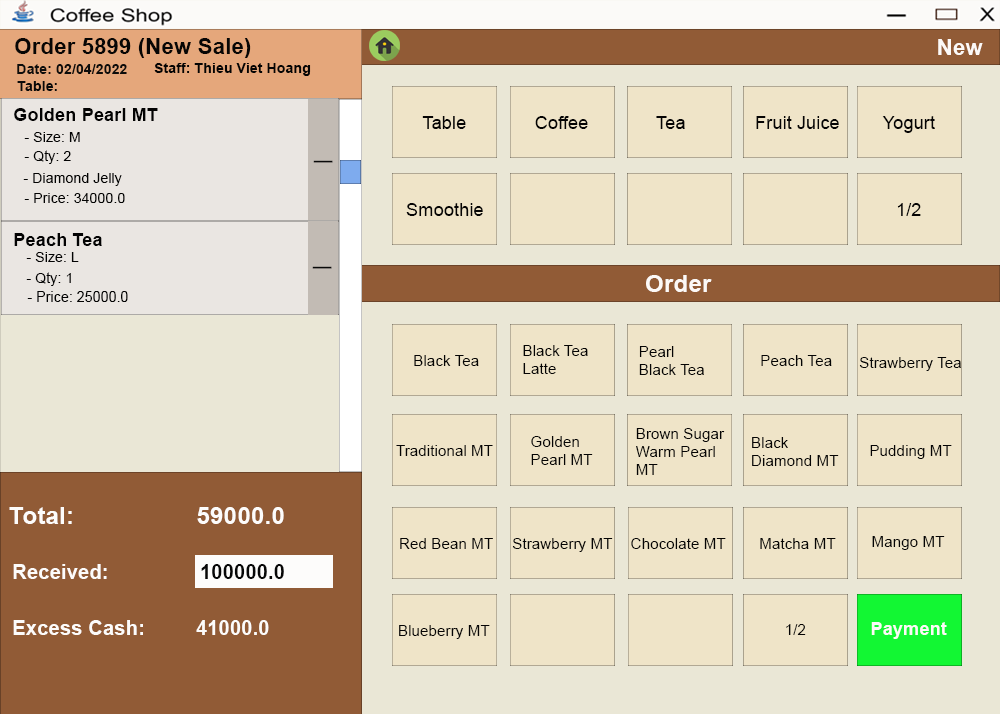
<style>
.page{position:relative;width:1000px;height:714px;background:#eae7d6}
.page>*{position:absolute;margin:0}
.t1{font:22.4px "Arial-BoldMT";color:#070605}
.t2{font:22.4px "Arial-BoldMT";color:#fcf9f7}
.t3{font:14.3px "Arial-BoldMT";color:#0c0c0b}
.t4{font:14.3px "Arial-BoldMT";color:#040404}
.t5{font:14.3px "Arial-BoldMT";color:#090909}
.t6{font:18.4px "Arial-BoldMT";color:#030303}
.t7{font:18.4px "ArialMT";color:#050404}
.t8{font:14.3px "ArialMT";color:#030303}
.t9{font:36.7px "Arial-Black";color:#090909}
.t10{font:24.5px "Arial-BoldMT";color:#fcf9f7}
.t11{font:14.7px "ArialMT";color:#030303}
.t12{font:15.3px "ArialMT";color:#050404}
.t13{font:15.3px "ArialMT";color:#040404}
.t14{font:24.5px "Arial-BoldMT";color:#fdfcfb}
.t15{font:20.4px "Arial-BoldMT";color:#fdfcfb}
.t16{font:20.4px "Arial-BoldMT";color:#070707}
.t17{font:18.4px "Arial-BoldMT";color:#fcf9f8}
</style>
<div class="page">
<p class="t1" style="left:15px;top:38px;width:236px;height:20px">Order 5899 (New Sale)</p>
<p class="t2" style="left:938px;top:39px;width:45px;height:16px">New</p>
<p class="t3" style="left:17px;top:64px;width:110px;height:10px">Date: 02/04/2022</p>
<p class="t4" style="left:154px;top:63px;width:157px;height:13px">Staff: Thieu Viet Hoang</p>
<p class="t5" style="left:17px;top:81px;width:40px;height:10px">Table:</p>
<p class="t6" style="left:14px;top:108px;width:144px;height:13px">Golden Pearl MT</p>
<p class="t7" style="left:422px;top:116px;width:44px;height:13px">Table</p>
<p class="t7" style="left:535px;top:116px;width:53px;height:13px">Coffee</p>
<p class="t7" style="left:656px;top:116px;width:29px;height:13px">Tea</p>
<p class="t7" style="left:756px;top:116px;width:83px;height:13px">Fruit Juice</p>
<p class="t7" style="left:882px;top:116px;width:53px;height:17px">Yogurt</p>
<p class="t8" style="left:24px;top:132px;width:56px;height:10px">- Size: M</p>
<p class="t8" style="left:24px;top:150px;width:47px;height:14px">- Qty: 2</p>
<p class="t9" style="left:313px;top:160px;width:20px;height:3px">_</p>
<p class="t8" style="left:23px;top:173px;width:99px;height:13px">- Diamond Jelly</p>
<p class="t8" style="left:24px;top:193px;width:101px;height:10px">- Price: 34000.0</p>
<p class="t7" style="left:406px;top:203px;width:77px;height:13px">Smoothie</p>
<p class="t7" style="left:897px;top:203px;width:24px;height:13px">1/2</p>
<p class="t6" style="left:14px;top:233px;width:88px;height:13px">Peach Tea</p>
<p class="t8" style="left:26px;top:252px;width:53px;height:10px">- Size: L</p>
<p class="t9" style="left:312px;top:266px;width:20px;height:3px">_</p>
<p class="t8" style="left:26px;top:272px;width:45px;height:14px">- Qty: 1</p>
<p class="t10" style="left:646px;top:275px;width:66px;height:17px">Order</p>
<p class="t11" style="left:27px;top:291px;width:101px;height:11px">- Price: 25000.0</p>
<p class="t12" style="left:523px;top:345px;width:65px;height:29px">Black Tea<br>Latte</p>
<p class="t12" style="left:639px;top:346px;width:65px;height:29px">Pearl <br>Black Tea</p>
<p class="t12" style="left:414px;top:355px;width:65px;height:11px">Black Tea</p>
<p class="t13" style="left:761px;top:355px;width:71px;height:11px">Peach Tea</p>
<p class="t13" style="left:859px;top:357px;width:102px;height:14px">Strawberry Tea</p>
<p class="t12" style="left:531px;top:436px;width:62px;height:29px">Golden<br>Pearl MT</p>
<p class="t12" style="left:636px;top:428px;width:89px;height:47px">Brown Sugar<br>Warm Pearl <br>MT</p>
<p class="t12" style="left:752px;top:437px;width:87px;height:29px">Black<br>Diamond MT</p>
<p class="t12" style="left:396px;top:445px;width:97px;height:11px">Traditional MT</p>
<p class="t12" style="left:870px;top:445px;width:82px;height:14px">Pudding MT</p>
<p class="t14" style="left:9px;top:507px;width:275px;height:17px">Total:                  59000.0</p>
<p class="t12" style="left:400px;top:538px;width:93px;height:11px">Red Bean MT</p>
<p class="t12" style="left:512px;top:538px;width:101px;height:14px">Strawberry MT</p>
<p class="t12" style="left:631px;top:538px;width:95px;height:11px">Chocolate MT</p>
<p class="t12" style="left:760px;top:538px;width:76px;height:11px">Matcha MT</p>
<p class="t12" style="left:872px;top:536px;width:73px;height:14px">Mango MT</p>
<p class="t15" style="left:13px;top:564px;width:94px;height:15px">Received:</p>
<p class="t16" style="left:201px;top:564px;width:83px;height:15px">100000.0</p>
<p class="t15" style="left:13px;top:620px;width:256px;height:15px">Excess Cash:  41000.0</p>
<p class="t12" style="left:399px;top:625px;width:91px;height:14px">Blueberry MT</p>
<p class="t12" style="left:786px;top:624px;width:20px;height:11px">1/2</p>
<p class="t17" style="left:871px;top:622px;width:76px;height:17px">Payment</p>
</div>
